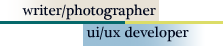
<style>
.page{position:relative;width:223px;height:46px;background:#ffffff}
.page>*{position:absolute;margin:0}
.t1{font:15px "PlantagenetCherokee";color:#00071c}
</style>
<div class="page">
<p class="t1" style="left:22px;top:4px;width:134px;height:16px">writer/photographer</p>
<p class="t1" style="left:86px;top:26px;width:103px;height:16px">ui/ux developer</p>
</div>
